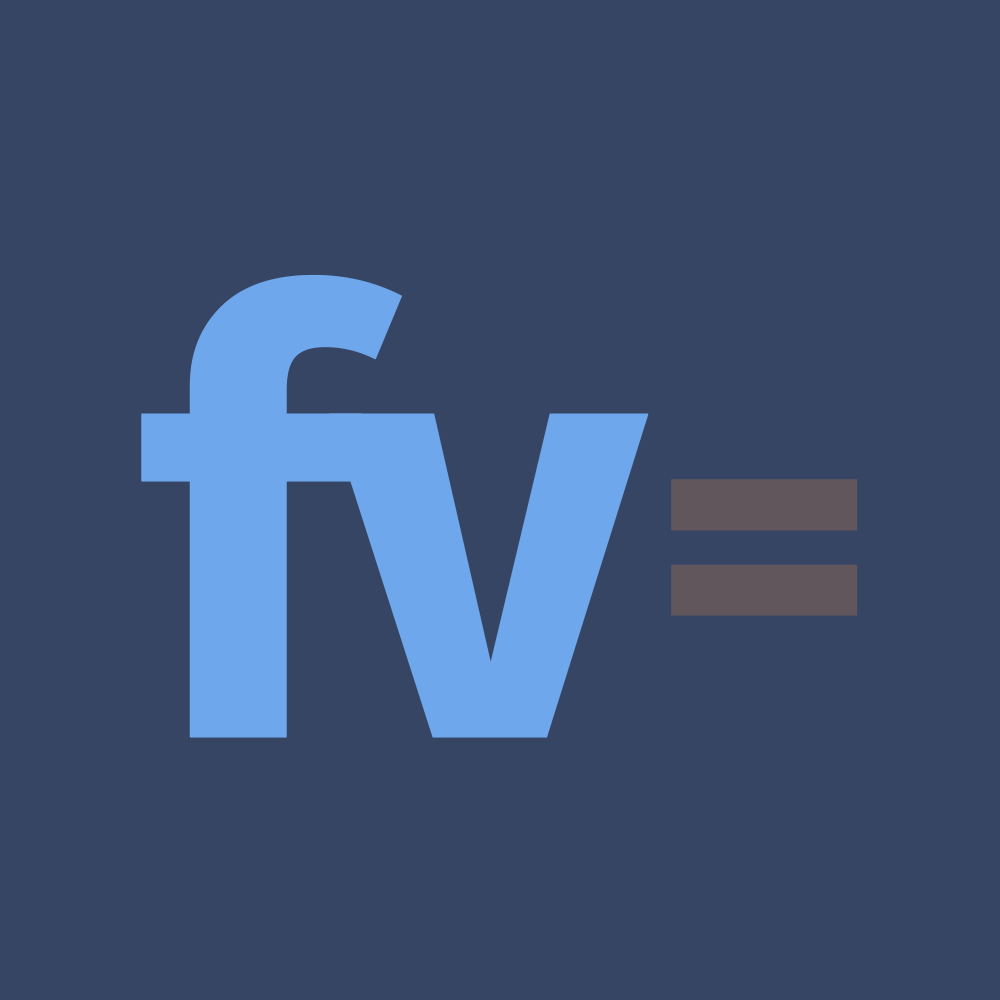
<style>
.page{position:relative;width:1000px;height:1000px;background:#364564}
.page>*{position:absolute;margin:0}
.t1{font:608.1px "FiraSans-Bold";color:#6ea7eb;font-weight:bold}
.t2{font:406.4px "FiraCode-Bold";color:#60565b;font-weight:bold}
</style>
<div class="page">
<p class="t1" style="left:141px;top:274px;width:262px;height:464px">f</p>
<p class="t1" style="left:328px;top:413px;width:321px;height:325px">v</p>
<p class="t2" style="left:671px;top:479px;width:187px;height:137px">=</p>
</div>
